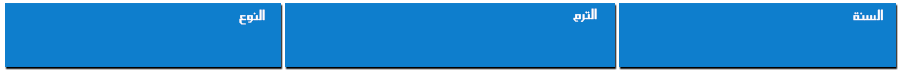
<style>
.page{position:relative;width:900px;height:70px;background:#0e7ecd}
.page>*{position:absolute;margin:0}
.t1{font:17px "SC_KHALID";color:#fefdfd}
.t2{font:17px "SC_KHALID";color:#fffffe}
.t3{font:17px "SC_KHALID";color:#fcfdfe}
</style>
<div class="page">
<p class="t1" style="left:239px;top:9px;width:26px;height:16px">النوع</p>
<p class="t2" style="left:573px;top:8px;width:24px;height:14px">الترم</p>
<p class="t3" style="left:853px;top:9px;width:30px;height:12px">السنة</p>
</div>
